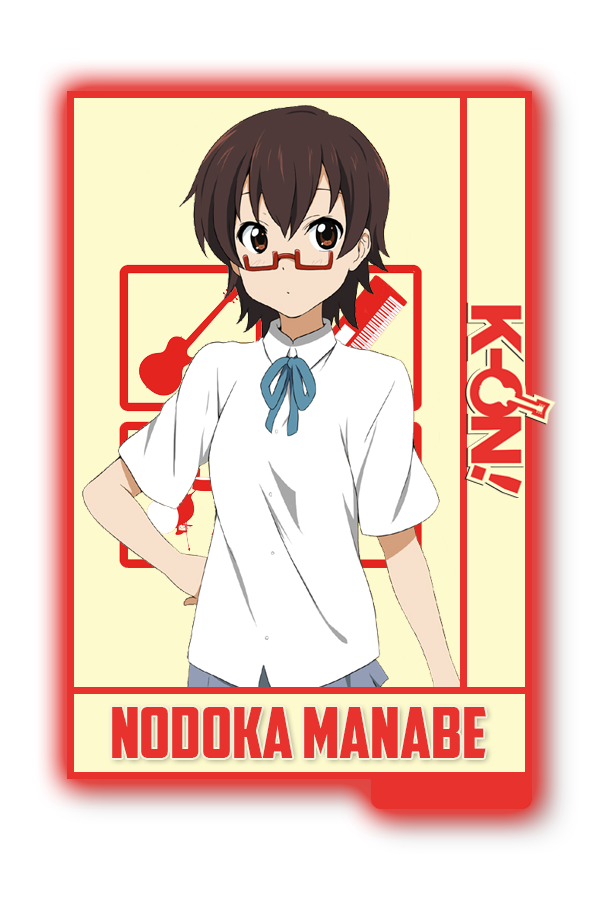
<style>
.page{position:relative;width:600px;height:900px;background:#ffffff}
.page>*{position:absolute;margin:0}
.t1{font:70.8px "AmericanCaptain";color:#e7322e}
</style>
<div class="page">
<p class="t1" style="left:112px;top:707px;width:374px;height:51px">nodoka manabe</p>
</div>
